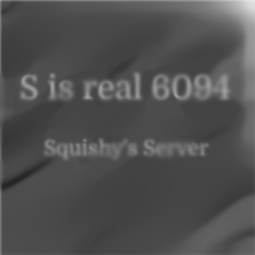
<style>
.page{position:relative;width:255px;height:255px}
.page>*{position:absolute;margin:0}
.t1{font:32.8px "Domine-Regular";color:#878787}
.t2{font:20.6px "Domine-Regular";color:#737372}
</style>
<div class="page">
<p class="t1" style="left:21px;top:73px;width:209px;height:27px">S is real 6094</p>
<p class="t2" style="left:45px;top:138px;width:164px;height:21px">Squishy's Server</p>
</div>
